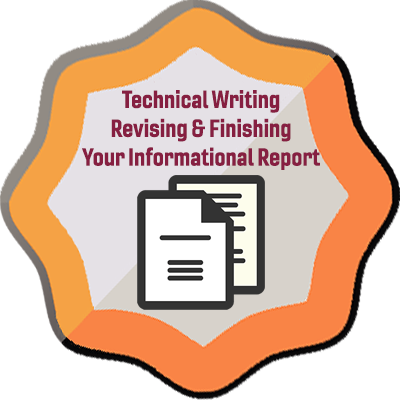
<style>
.page{position:relative;width:400px;height:400px;background:#ffffff}
.page>*{position:absolute;margin:0}
.t1{font:24px "Gineso-ConBol";color:#861f41}
</style>
<div class="page">
<p class="t1" style="left:82px;top:90px;width:238px;height:80px;text-align:center">Technical Writing<br>Revising &amp; Finishing<br>Your Informational Report</p>
</div>
